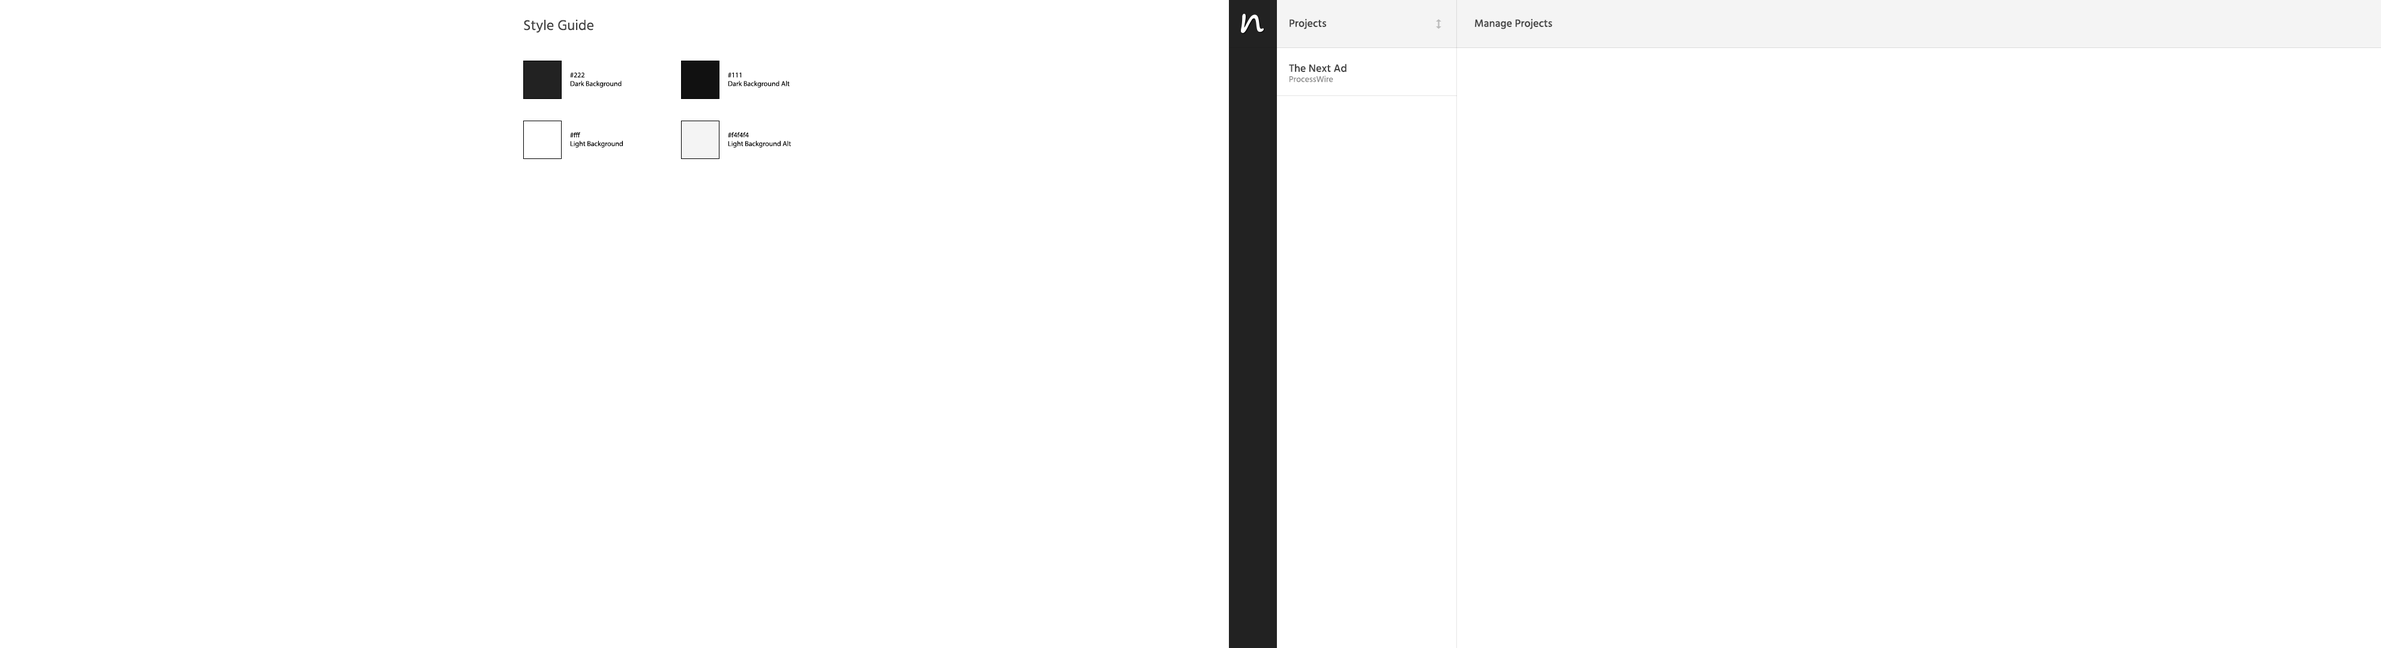
<style>
.page{position:relative;width:2381px;height:648px;background:#ffffff}
.page>*{position:absolute;margin:0}
.t1{font:14.4px "Hind-Regular";color:#404040}
.t2{font:10.8px "Hind-Medium";color:#444444}
.t3{font:8.4px "Hind-Regular";color:#888888}
.t4{font:7.2px "MyriadPro-Regular";color:#000000}
</style>
<div class="page">
<p class="t1" style="left:524px;top:19px;width:69px;height:14px">Style Guide</p>
<p class="t2" style="left:1289px;top:19px;width:38px;height:10px">Projects</p>
<p class="t2" style="left:1475px;top:19px;width:77px;height:10px">Manage Projects</p>
<p class="t2" style="left:1289px;top:64px;width:57px;height:18px">The Next Ad<br><span class="t3">ProcessWire</span></p>
<p class="t4" style="left:570px;top:73px;width:52px;height:15px">#222<br>Dark Background</p>
<p class="t4" style="left:728px;top:73px;width:62px;height:15px">#111<br>Dark Background Alt</p>
<p class="t4" style="left:570px;top:132px;width:53px;height:16px">#fff<br>Light Background</p>
<p class="t4" style="left:728px;top:132px;width:63px;height:16px">#f4f4f4<br>Light Background Alt</p>
</div>
